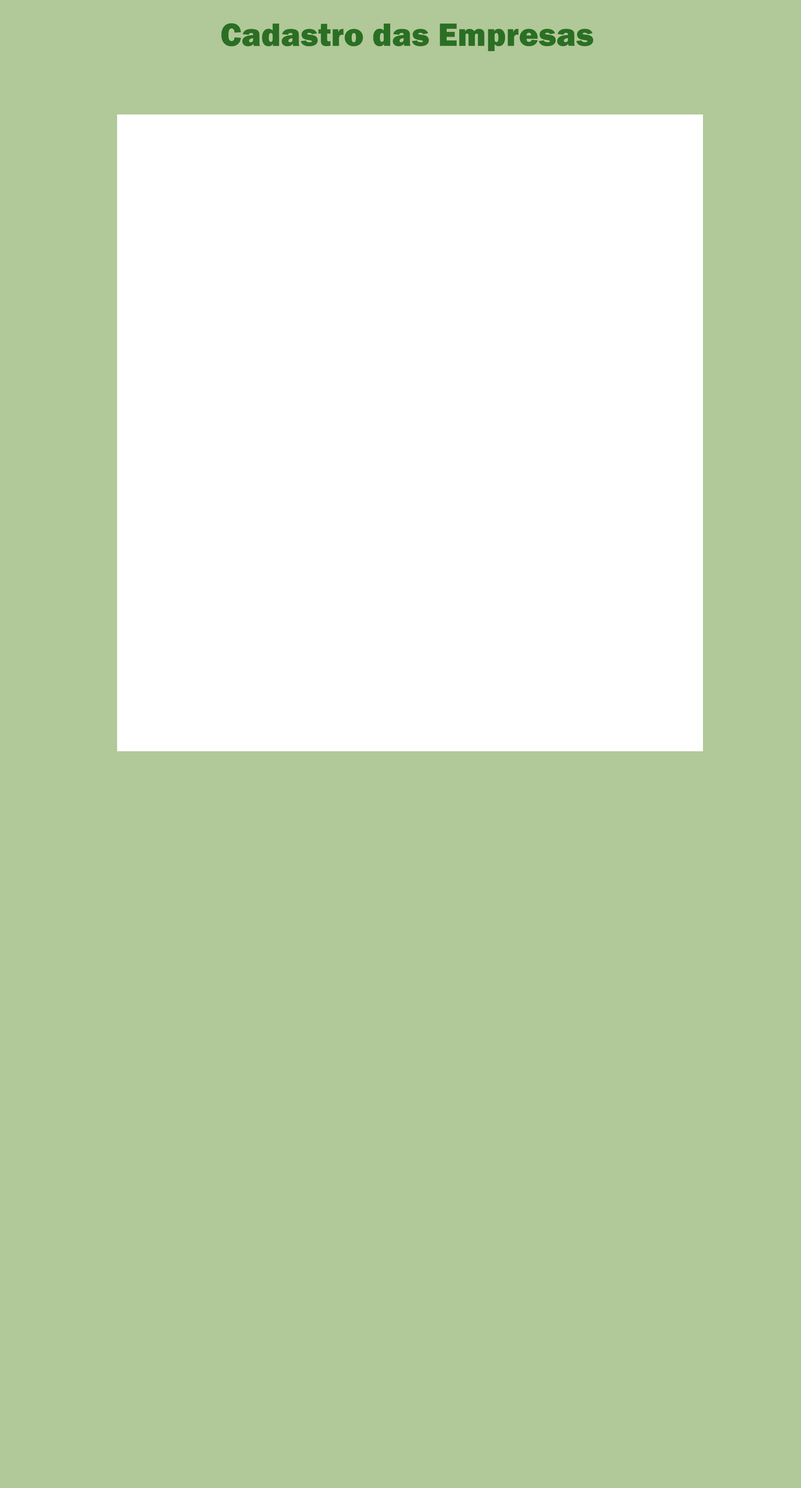
<style>
.page{position:relative;width:801px;height:1488px;background:#b1c899}
.page>*{position:absolute;margin:0}
.t1{font:57.2px "FranklinGothic-Heavy";letter-spacing:0.005em;color:#2a6f23}
</style>
<div class="page">
<p class="t1" style="left:221px;top:23px;width:373px;height:28px">Cadastro das Empresas</p>
</div>
